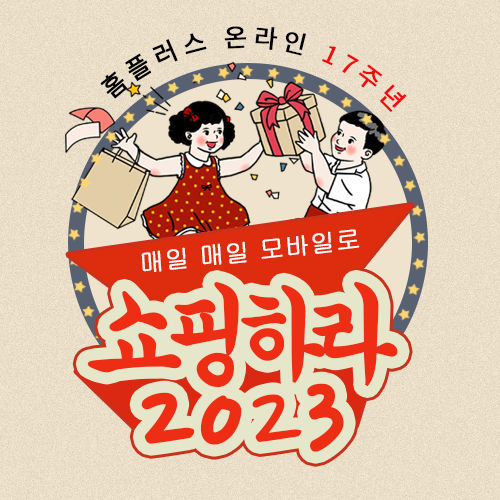
<style>
.page{position:relative;width:500px;height:500px}
.page>*{position:absolute;margin:0}
.t1{font:25px "NotoSansKR-Regular";letter-spacing:0.2em;color:#000000;font-weight:bold}
.t2{font:25px "NotoSansKR-Regular";letter-spacing:0.2em;color:#f40b0b;font-weight:bold}
.t3{font:25px "Gulim";color:#fdfafa;font-weight:bold}
.t4{font:110px/91px "MGungJeong";letter-spacing:-0.36em;color:#ed2d14;font-weight:bold}
.t5{font:129px/91px "NanumPenOTF";letter-spacing:0.02em;color:#ed2d14;font-weight:bold}
</style>
<div class="page">
<p class="t1" style="left:100px;top:26px;width:307px;height:86px;rotate:-1deg">홈플러스 온라인 <span class="t2">17주년</span></p>
<p class="t3" style="left:141px;top:229px;width:219px;height:43px;rotate:-6deg">매일 매일 모바일로</p>
<p class="t4" style="left:87px;top:281px;width:311px;height:171px;text-align:center">쇼핑하라<br><span class="t5">2023</span></p>
</div>
